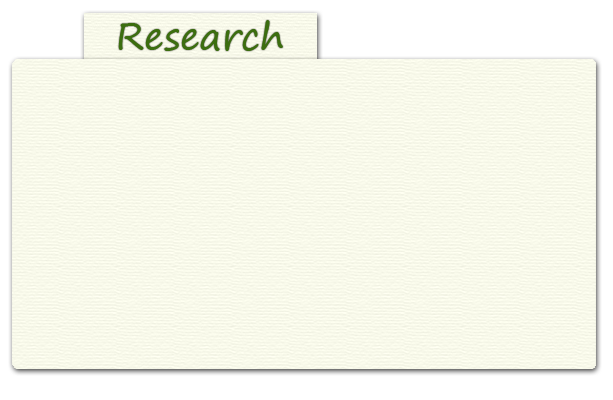
<style>
.page{position:relative;width:613px;height:400px}
.page>*{position:absolute;margin:0}
.t1{font:37.8px "SegoePrint";color:#3c6e0f}
</style>
<div class="page">
<p class="t1" style="left:118px;top:20px;width:165px;height:31px">Research</p>
</div>
